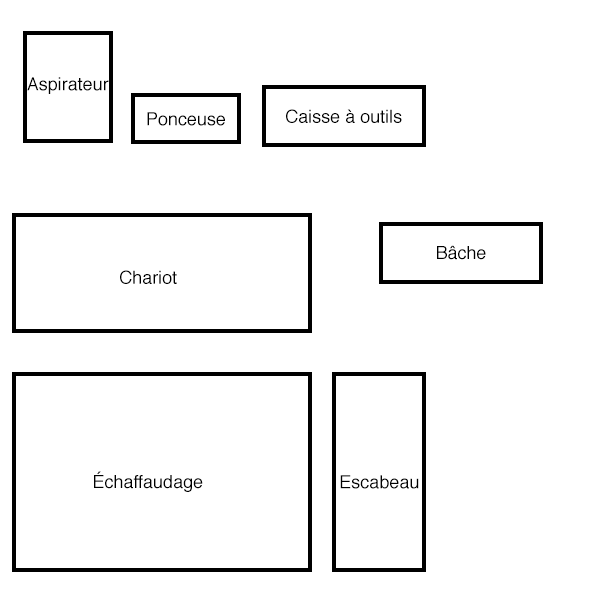
<style>
.page{position:relative;width:600px;height:600px;background:#ffffff}
.page>*{position:absolute;margin:0}
.t1{font:18px "Helvetica";color:#000000}
</style>
<div class="page">
<p class="t1" style="left:27px;top:77px;width:82px;height:17px">Aspirateur</p>
<p class="t1" style="left:147px;top:112px;width:78px;height:14px">Ponceuse</p>
<p class="t1" style="left:286px;top:109px;width:116px;height:14px">Caisse à outils</p>
<p class="t1" style="left:437px;top:245px;width:49px;height:15px">Bâche</p>
<p class="t1" style="left:120px;top:270px;width:57px;height:14px">Chariot</p>
<p class="t1" style="left:94px;top:471px;width:109px;height:21px">Échaffaudage</p>
<p class="t1" style="left:340px;top:475px;width:79px;height:14px">Escabeau</p>
</div>
